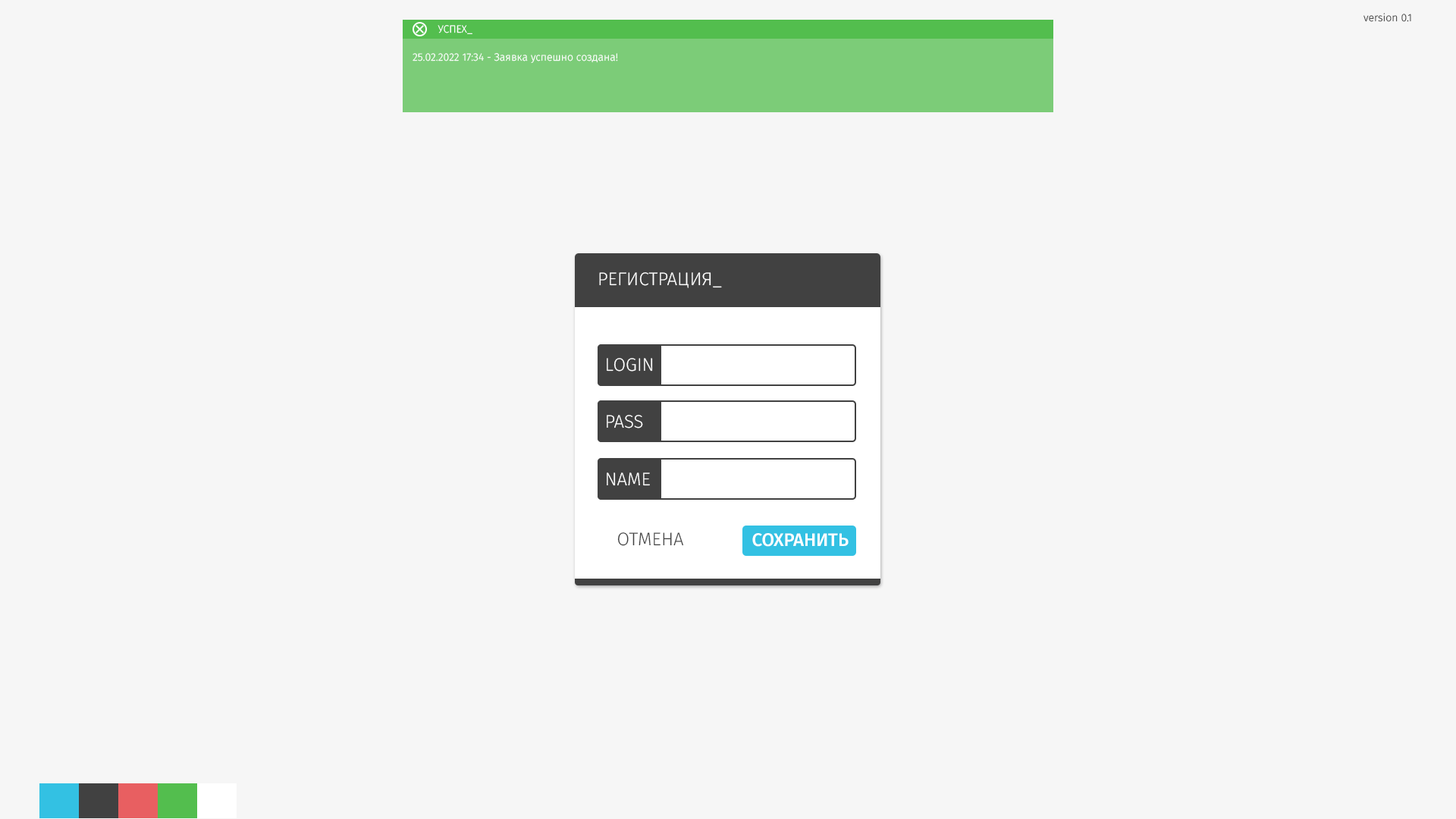
<style>
.page{position:relative;width:1456px;height:819px;background:#f6f6f6}
.page>*{position:absolute;margin:0}
.t1{font:10.6px "FiraSans-Light";color:#414141}
.t2{font:10.6px "FiraSans-Light";color:#ffffff;text-transform:uppercase}
.t3{font:10.6px "FiraSans-Light";color:#ffffff}
.t4{font:18.2px "FiraSans-Light";color:#ffffff;text-transform:uppercase}
.t5{font:18.2px "FiraSans-Light";color:#414141;text-transform:uppercase}
.t6{font:18.2px "FiraSans-Medium";color:#ffffff;text-transform:uppercase}
</style>
<div class="page">
<p class="t1" style="left:1363px;top:13px;width:48px;height:9px">version 0.1</p>
<p class="t2" style="left:438px;top:25px;width:34px;height:9px">Успех_</p>
<p class="t3" style="left:413px;top:53px;width:205px;height:10px">25.02.2022 17:34 - Заявка успешно создана!</p>
<p class="t4" style="left:599px;top:272px;width:123px;height:16px">Регистрация_</p>
<p class="t4" style="left:607px;top:358px;width:46px;height:14px">Login</p>
<p class="t4" style="left:607px;top:415px;width:36px;height:13px">Pass</p>
<p class="t4" style="left:607px;top:472px;width:43px;height:14px">NAME</p>
<p class="t5" style="left:617px;top:532px;width:66px;height:14px">Отмена</p>
<p class="t6" style="left:752px;top:533px;width:97px;height:14px">Сохранить</p>
</div>
